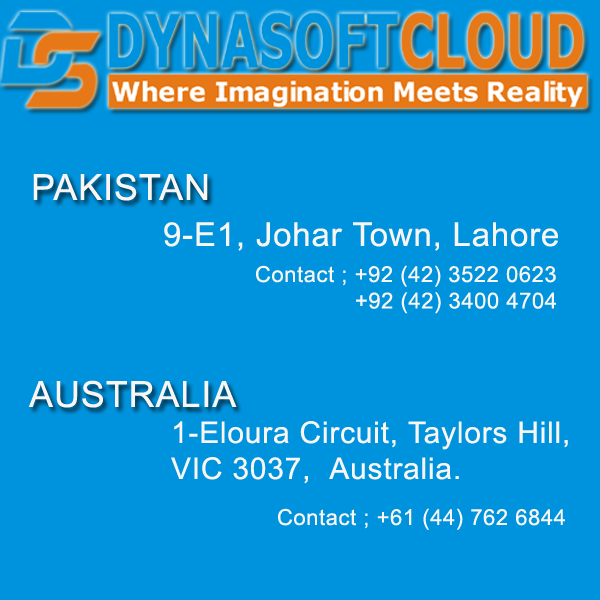
<style>
.page{position:relative;width:600px;height:600px;background:#0093dd}
.page>*{position:absolute;margin:0}
.t1{font:36px "ArialMT";letter-spacing:0.025em;color:#f8f5f2}
.t2{font:33px "ArialMT";letter-spacing:0.025em;color:#f8f5f2}
.t3{font:22px "ArialMT";letter-spacing:0.025em;color:#f8f5f2}
.t4{font:30px "ArialMT";letter-spacing:0.025em;color:#f8f5f2}
</style>
<div class="page">
<p class="t1" style="left:33px;top:173px;width:175px;height:28px">PAKISTAN</p>
<p class="t2" style="left:164px;top:222px;width:394px;height:29px">9-E1, Johar Town, Lahore</p>
<p class="t3" style="left:256px;top:265px;width:300px;height:49px">Contact ; +92 (42) 3522 0623<br>               +92 (42) 3400 4704</p>
<p class="t1" style="left:28px;top:380px;width:209px;height:28px">AUSTRALIA</p>
<p class="t4" style="left:171px;top:421px;width:397px;height:63px">1-Eloura Circuit, Taylors Hill,<br>VIC 3037,  Australia.</p>
<p class="t3" style="left:278px;top:508px;width:287px;height:22px">Contact ; +61 (44) 762 6844</p>
</div>
